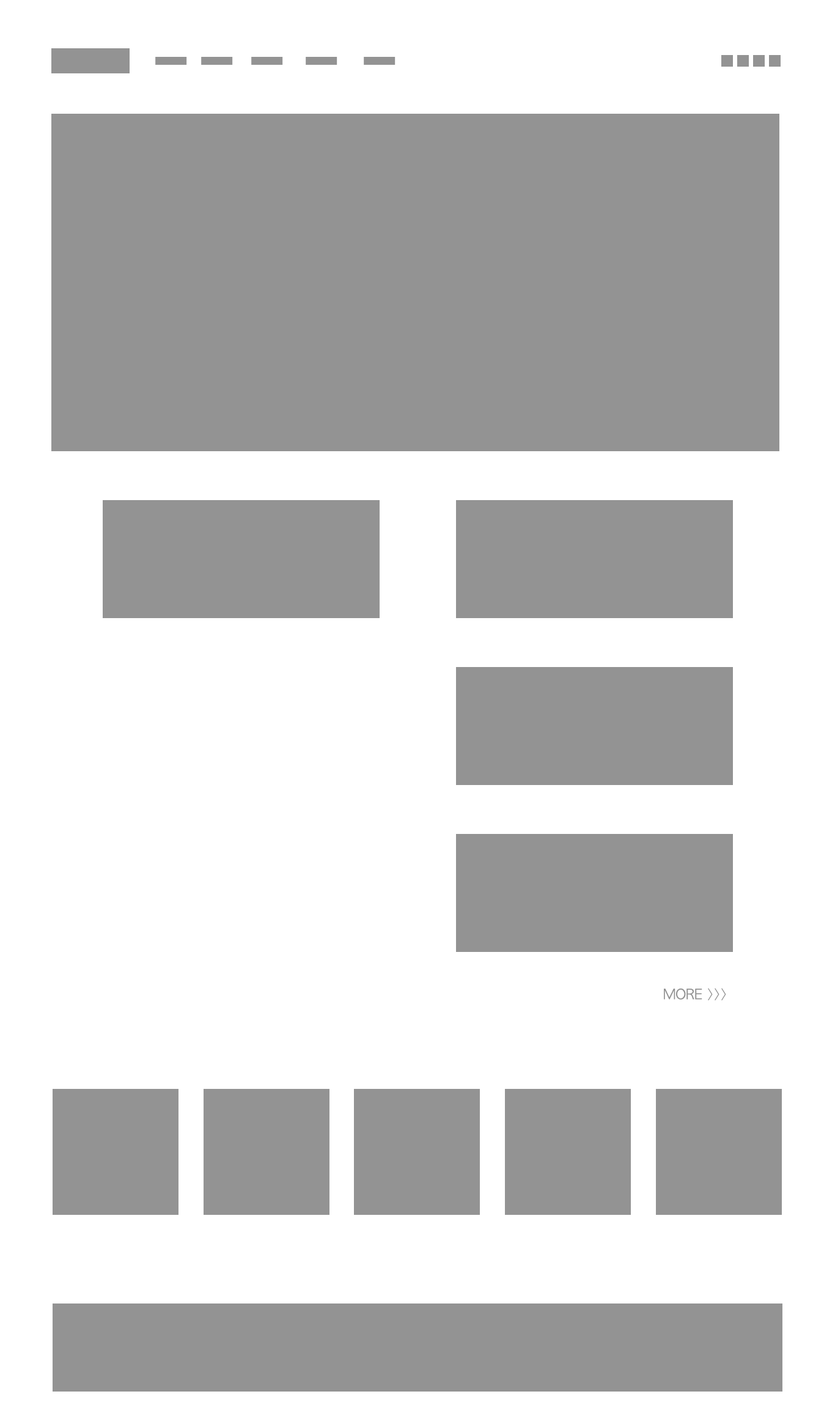
<style>
.page{position:relative;width:835px;height:1427px;background:#ffffff}
.page>*{position:absolute;margin:0}
.t1{font:13.5px "AppleGothic";color:#939393}
</style>
<div class="page">
<p class="t1" style="left:664px;top:988px;width:63px;height:13px">MORE &gt;&gt;&gt;</p>
</div>
